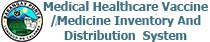
<style>
.page{position:relative;width:210px;height:42px;background:#ffffff}
.page>*{position:absolute;margin:0}
.t1{font:12px "Tahoma-Bold";color:#3d7083}
</style>
<div class="page">
<p class="t1" style="left:43px;top:1px;width:165px;height:41px">Medical Healthcare Vaccine<br>  /Medicine Inventory And <br>      Distribution  System</p>
</div>
